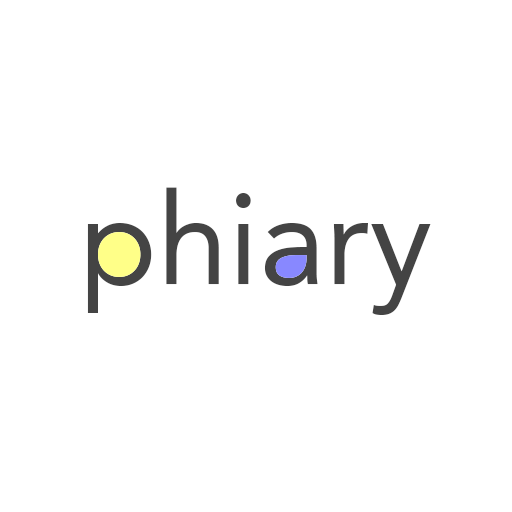
<style>
.page{position:relative;width:512px;height:512px;background:#ffffff}
.page>*{position:absolute;margin:0}
.t1{font:128px "Avenir-Roman";color:#444444}
</style>
<div class="page">
<p class="t1" style="left:87px;top:187px;width:344px;height:128px">phiary</p>
</div>
